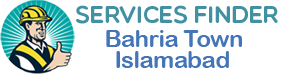
<style>
.page{position:relative;width:285px;height:74px;background:#ffffff}
.page>*{position:absolute;margin:0}
.t1{font:24px/21.3px "ArialRoundedMTBold";letter-spacing:-0.025em;color:#4375b8}
.t2{font:34.7px/32px "Multicolore";color:#4291a2}
.t3{font:24px/24px "Multicolore";letter-spacing:-0.025em;color:#4291a2}
</style>
<div class="page">
<p class="t1" style="left:76px;top:5px;width:202px;height:63px;text-align:center"><span class="t2">  </span><span class="t3">Services Finder<br>   </span>Bahria Town <br>  Islamabad</p>
</div>
